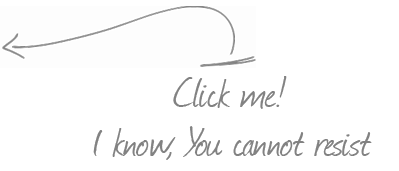
<style>
.page{position:relative;width:399px;height:171px;background:#ffffff}
.page>*{position:absolute;margin:0}
.t1{font:48px "Journal";color:#828282}
</style>
<div class="page">
<p class="t1" style="left:173px;top:76px;width:114px;height:33px">Click me!</p>
<p class="t1" style="left:93px;top:126px;width:279px;height:34px">I know, You cannot resist</p>
</div>
